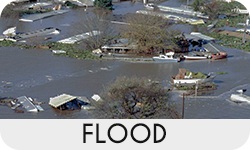
<style>
.page{position:relative;width:250px;height:150px}
.page>*{position:absolute;margin:0}
.t1{font:25px "CaviarDreams-Bold";color:#141414}
</style>
<div class="page">
<p class="t1" style="left:83px;top:123px;width:83px;height:21px">FLOOD</p>
</div>
